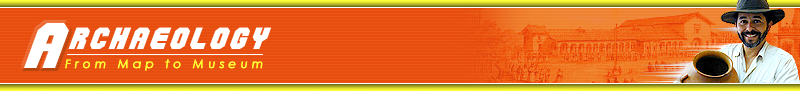
<style>
.page{position:relative;width:800px;height:91px;background:#e84d0d}
.page>*{position:absolute;margin:0}
.t1{font:60px "ActionForceNormal";letter-spacing:0.025em;color:#ffffff}
.t2{font:36px "ActionForceNormal";letter-spacing:0.05em;color:#ffffff}
.t3{font:12px "CenturyGothic-Italic";letter-spacing:0.32em;color:#ffff33;font-weight:bold}
</style>
<div class="page">
<p class="t1" style="left:24px;top:23px;width:45px;height:45px">A</p>
<p class="t2" style="left:68px;top:27px;width:204px;height:22px">rchaeology</p>
<p class="t3" style="left:65px;top:59px;width:198px;height:12px">From Map to Museum</p>
</div>
